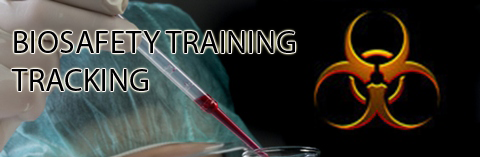
<style>
.page{position:relative;width:480px;height:157px;background:#000000}
.page>*{position:absolute;margin:0}
.t1{font:32px "MyriadPro-Regular";color:#000000}
</style>
<div class="page">
<p class="t1" style="left:11px;top:31px;width:284px;height:60px">BIOSAFETY TRAINING<br>TRACKING</p>
</div>
